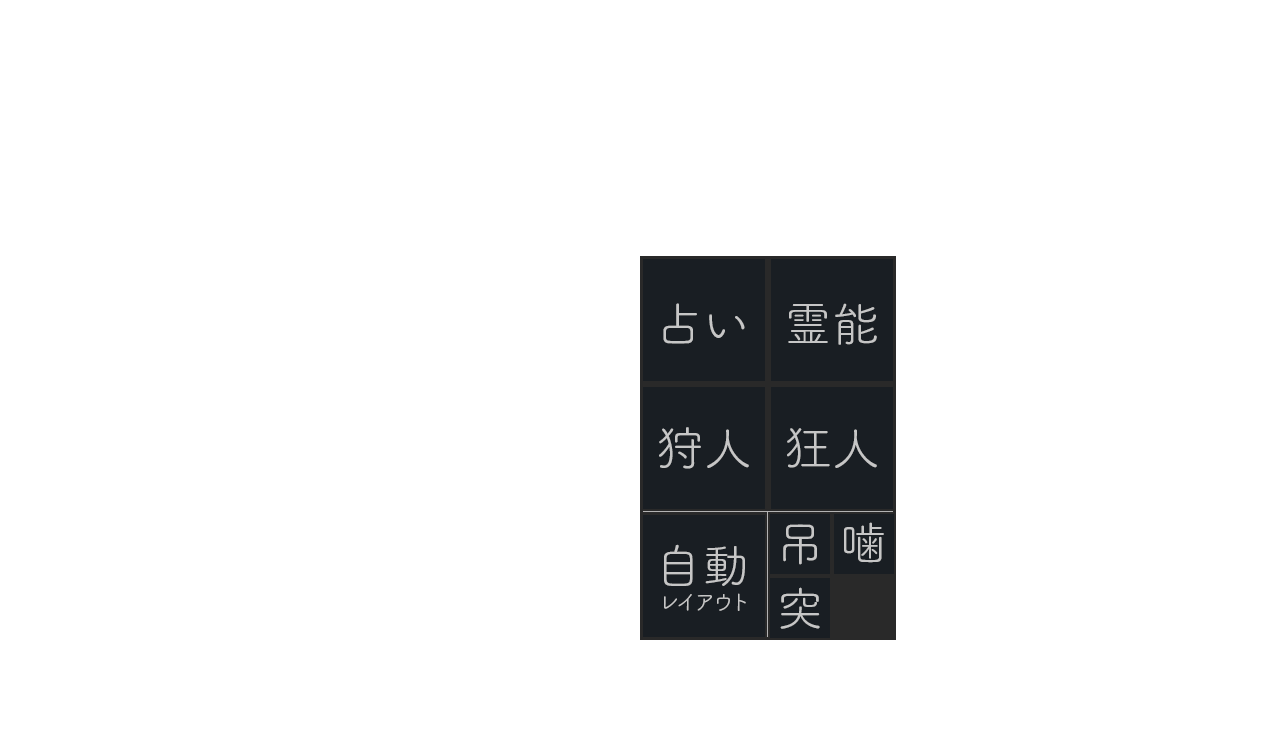
<style>
.page{position:relative;width:1282px;height:752px;background:#ffffff}
.page>*{position:absolute;margin:0}
.t1{font:48px "TsukuARdGothicStd-R";color:#c6c6c6}
.t2{font:22px "TsukuARdGothicStd-R";color:#c6c6c6}
</style>
<div class="page">
<p class="t1" style="left:663px;top:303px;width:82px;height:41px">占い</p>
<p class="t1" style="left:788px;top:303px;width:89px;height:42px">霊能</p>
<p class="t1" style="left:659px;top:427px;width:90px;height:42px">狩人</p>
<p class="t1" style="left:787px;top:428px;width:90px;height:40px">狂人</p>
<p class="t1" style="left:783px;top:524px;width:34px;height:41px">吊</p>
<p class="t1" style="left:844px;top:522px;width:40px;height:41px">噛</p>
<p class="t1" style="left:664px;top:544px;width:81px;height:42px">自動</p>
<p class="t2" style="left:664px;top:593px;width:82px;height:18px">レイアウト</p>
<p class="t1" style="left:780px;top:587px;width:40px;height:42px">突</p>
</div>
